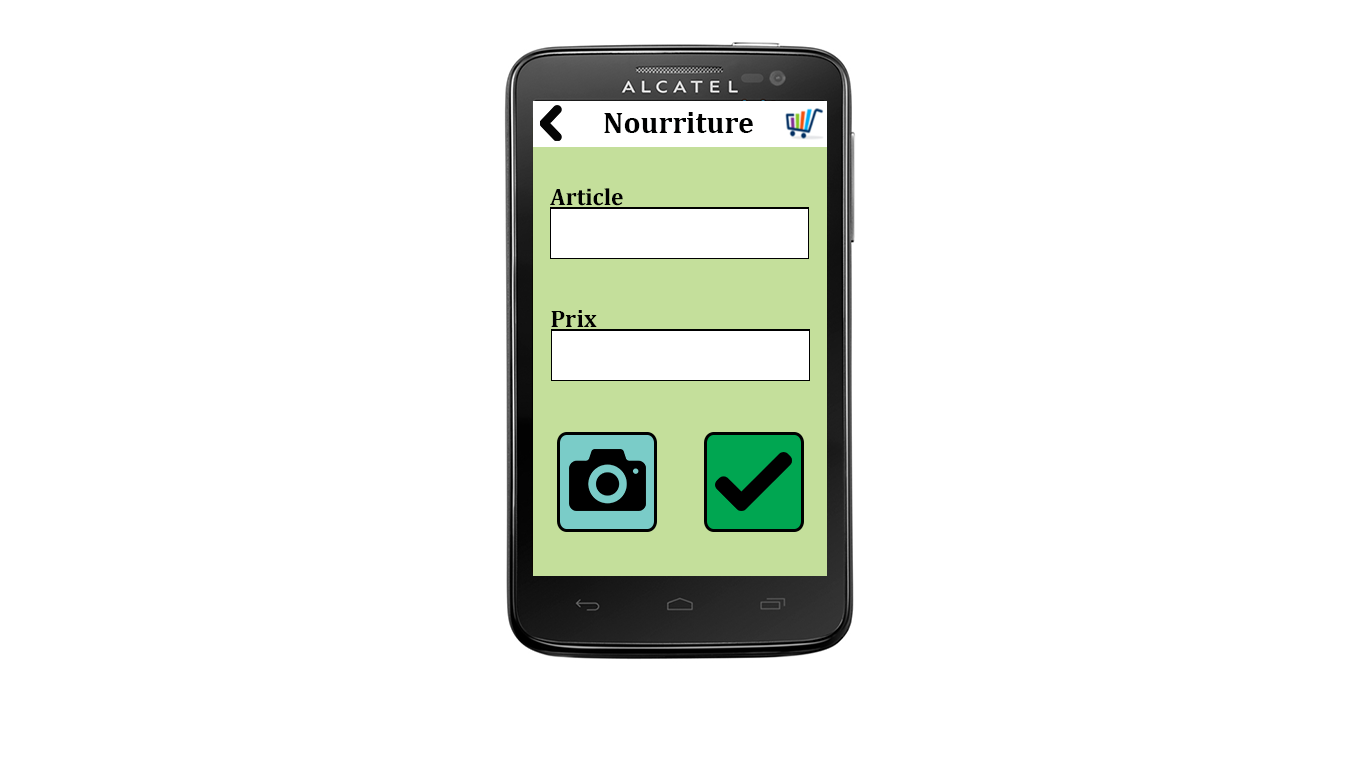
<style>
.page{position:relative;width:1366px;height:768px;background:#ffffff}
.page>*{position:absolute;margin:0}
.t1{font:30px "Cambria-Bold";color:#000101}
.t2{font:24px "Cambria-Bold";color:#000000}
</style>
<div class="page">
<p class="t1" style="left:604px;top:112px;width:149px;height:21px">Nourriture</p>
<p class="t2" style="left:550px;top:188px;width:73px;height:18px">Article</p>
<p class="t2" style="left:551px;top:310px;width:46px;height:17px">Prix</p>
</div>
